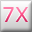
<style>
.page{position:relative;width:32px;height:32px}
.page>*{position:absolute;margin:0}
.t1{font:20.4px "Verdana"}
</style>
<div class="page">
<p class="t1" style="left:3px;top:7px;width:25px;height:15px">7X</p>
</div>
